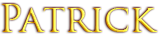
<style>
.page{position:relative;width:160px;height:35px;background:#ffffff}
.page>*{position:absolute;margin:0}
.t1{font:36.6px "TrajanPro-Regular"}
</style>
<div class="page">
<p class="t1" style="left:2px;top:4px;width:156px;height:28px">Patrick</p>
</div>
